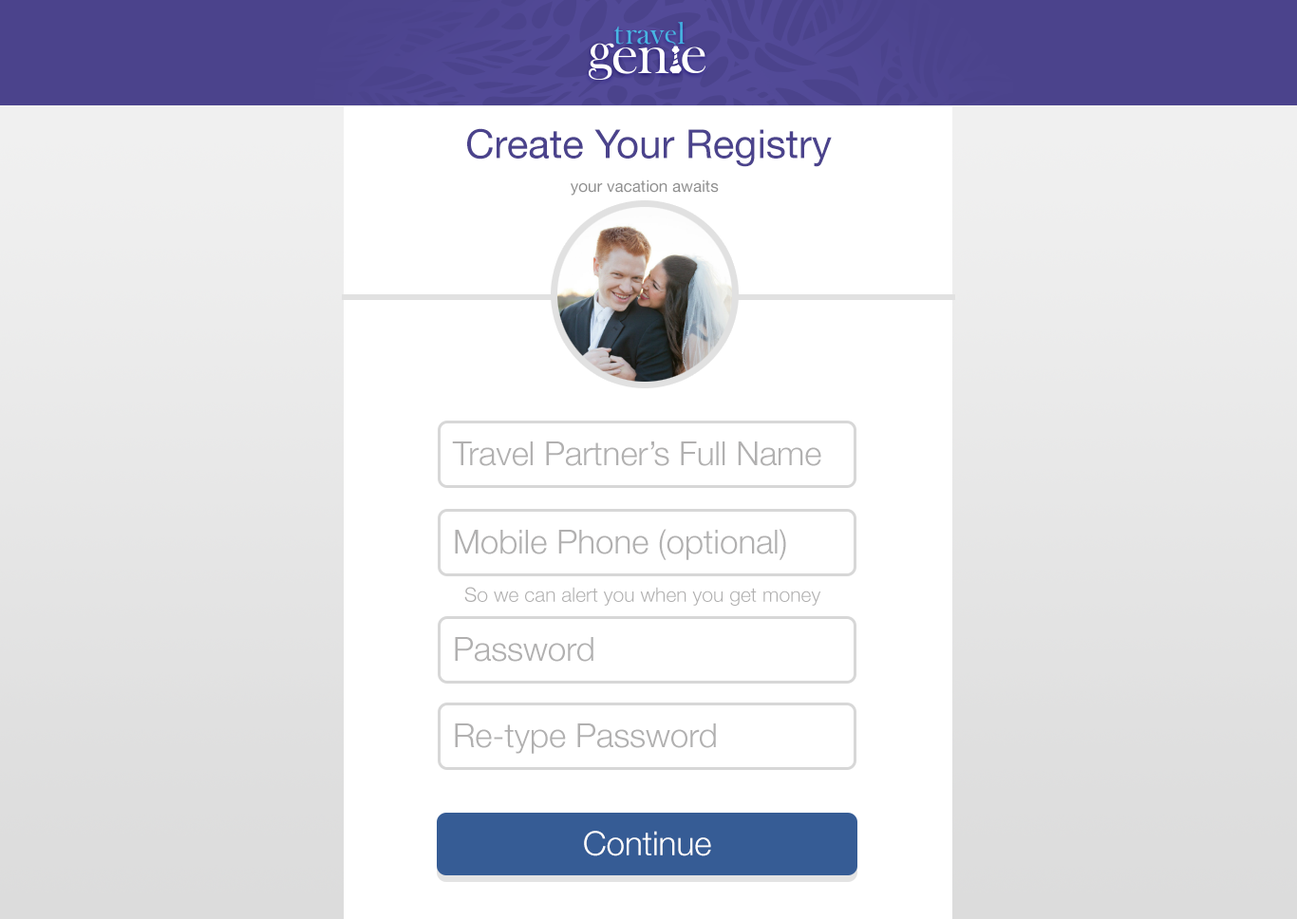
<style>
.page{position:relative;width:1297px;height:919px;background:#ffffff}
.page>*{position:absolute;margin:0}
.t1{font:39.9px "HelveticaNeue";color:#4b438c}
.t2{font:16.1px "HelveticaNeue";color:#8f8f8f}
.t3{font:33.2px "HelveticaNeue-Light";color:#b1b0b0}
.t4{font:20px "HelveticaNeue-Light";color:#b1b0b0}
.t5{font:33.2px "HelveticaNeue-Light";color:#ffffff}
</style>
<div class="page">
<p class="t1" style="left:467px;top:128px;width:365px;height:39px">Create Your Registry</p>
<p class="t2" style="left:571px;top:179px;width:148px;height:17px">your vacation awaits</p>
<p class="t3" style="left:452px;top:442px;width:369px;height:24px">Travel Partner’s Full Name</p>
<p class="t3" style="left:455px;top:529px;width:331px;height:31px">Mobile Phone (optional)</p>
<p class="t4" style="left:464px;top:587px;width:357px;height:19px">So we can alert you when you get money</p>
<p class="t3" style="left:455px;top:637px;width:139px;height:25px">Password</p>
<p class="t3" style="left:455px;top:724px;width:261px;height:30px">Re-type Password</p>
<p class="t5" style="left:584px;top:831px;width:127px;height:26px">Continue</p>
</div>
